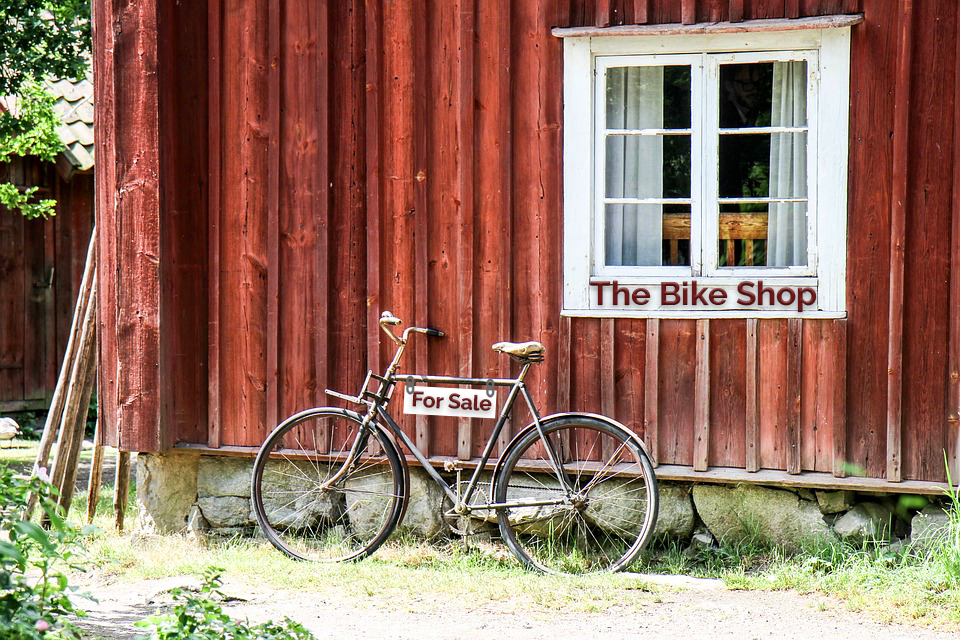
<style>
.page{position:relative;width:960px;height:640px}
.page>*{position:absolute;margin:0}
.t1{font:33.3px "RalewayRoman-Bold";color:#6b1818}
.t2{font:20.8px "RalewayRoman-Bold";color:#6b1818}
</style>
<div class="page">
<p class="t1" style="left:590px;top:280px;width:227px;height:33px">The Bike Shop</p>
<p class="t2" style="left:412px;top:391px;width:80px;height:20px;rotate:3deg">For Sale</p>
</div>
